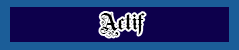
<style>
.page{position:relative;width:239px;height:50px;background:#0d004c}
.page>*{position:absolute;margin:0}
.t1{font:24px "MediciText";color:#000000}
</style>
<div class="page">
<p class="t1" style="left:100px;top:13px;width:45px;height:24px">Actif</p>
</div>
